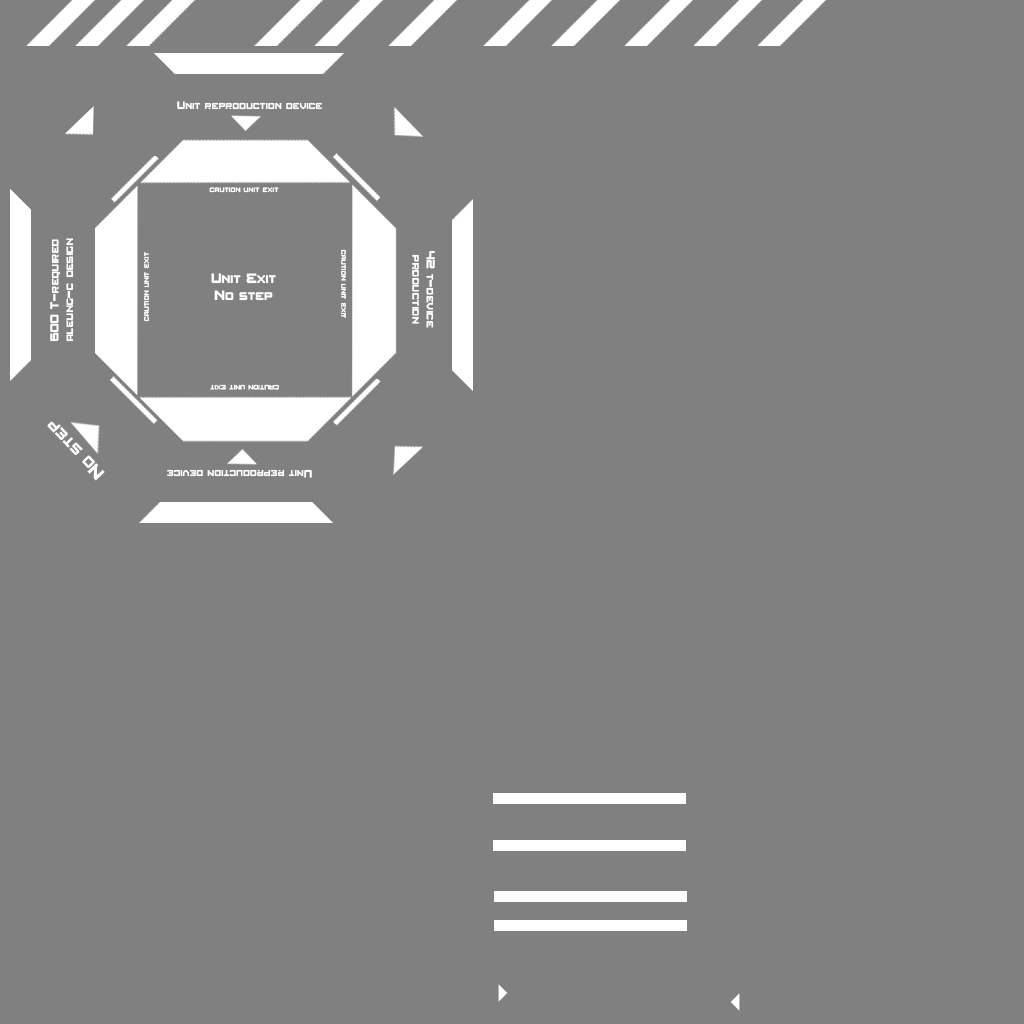
<style>
.page{position:relative;width:1024px;height:1024px;background:#808080}
.page>*{position:absolute;margin:0}
.t1{font:11px "Amuro";color:#ffffff}
.t2{font:8px "Amuro";color:#ffffff}
.t3{font:12px "Amuro";color:#ffffff}
.t4{font:14px "Amuro";color:#ffffff}
.t5{font:18px "Amuro";color:#ffffff}
</style>
<div class="page">
<p class="t1" style="left:177px;top:101px;width:145px;height:9px">Unit reproduction device</p>
<p class="t2" style="left:209px;top:187px;width:70px;height:6px">caution unit exit</p>
<p class="t3" style="left:50px;top:238px;width:24px;height:104px;text-align:center;rotate:-90deg">600 T-required<br>aleung-c design</p>
<p class="t2" style="left:144px;top:252px;width:5px;height:70px;rotate:-90deg">caution unit exit</p>
<p class="t2" style="left:341px;top:249px;width:5px;height:69px;rotate:90deg">caution unit exit</p>
<p class="t3" style="left:412px;top:250px;width:23px;height:78px;text-align:center;rotate:90deg">42 t-device<br>production</p>
<p class="t4" style="left:211px;top:273px;width:65px;height:28px;text-align:center">Unit Exit<br>No step</p>
<p class="t2" style="left:210px;top:384px;width:69px;height:6px;rotate:180deg">caution unit exit</p>
<p class="t5" style="left:47px;top:421px;width:58px;height:60px;rotate:-134deg">No step</p>
<p class="t1" style="left:167px;top:469px;width:145px;height:9px;rotate:180deg">Unit reproduction device</p>
</div>
